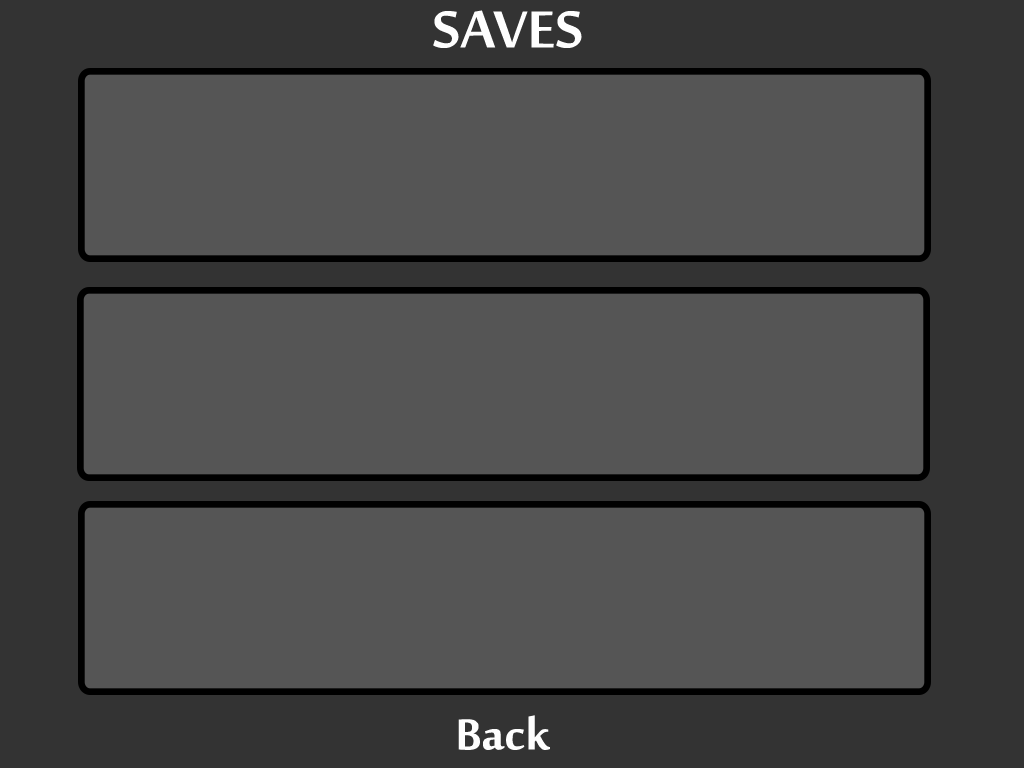
<style>
.page{position:relative;width:1024px;height:768px;background:#555555}
.page>*{position:absolute;margin:0}
.t1{font:72px "SakkalMajallaBold";color:#fefefe}
.t2{font:60px "SakkalMajallaBold";color:#fefefe}
</style>
<div class="page">
<p class="t1" style="left:433px;top:10px;width:149px;height:38px">SAVES</p>
<p class="t2" style="left:458px;top:715px;width:92px;height:35px">Back</p>
</div>
